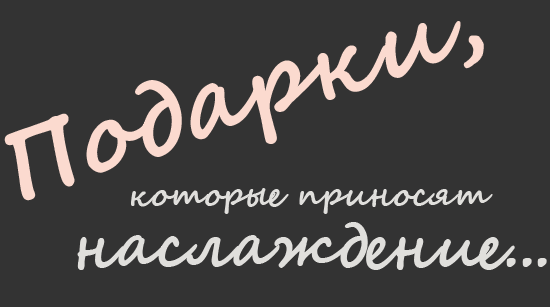
<style>
.page{position:relative;width:550px;height:307px;background:#333333}
.page>*{position:absolute;margin:0}
.t1{font:100px "SegoeScript-Bold";color:#fbdacf}
.t2{font:33px "SegoeScript-Bold";color:#e0dfdc}
.t3{font:60px "SegoeScript-Bold";color:#e0dfdc}
</style>
<div class="page">
<p class="t1" style="left:4px;top:21px;width:480px;height:180px;rotate:-18deg">Подарки,</p>
<p class="t2" style="left:131px;top:188px;width:362px;height:26px">которые приносят</p>
<p class="t3" style="left:77px;top:222px;width:470px;height:48px">наслаждение...</p>
</div>
